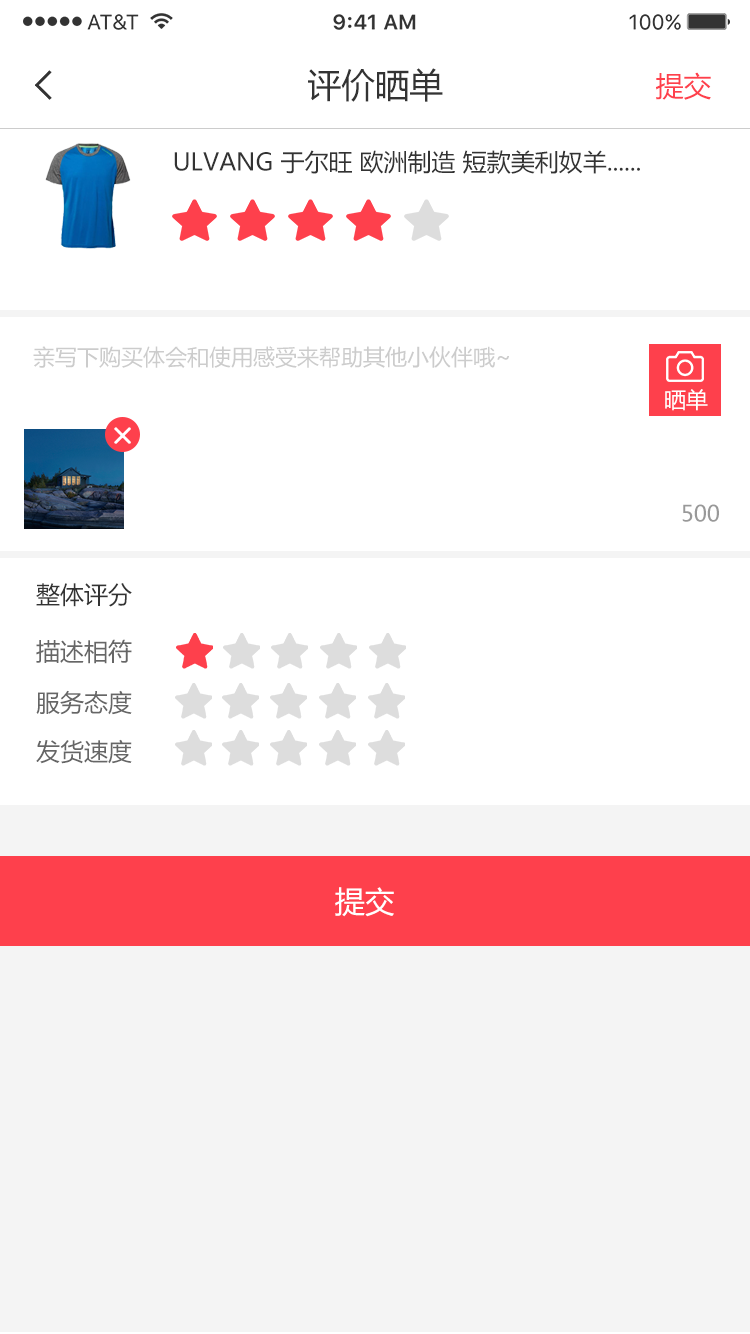
<style>
.page{position:relative;width:750px;height:1334px;background:#ffffff}
.page>*{position:absolute;margin:0}
.t1{font:34px "MicrosoftYaHei";color:#333333}
.t2{font:28px "MicrosoftYaHei";color:#fe404c}
.t3{font:24px "MicrosoftYaHei";color:#333333}
.t4{font:22px "MicrosoftYaHei";color:#cccccc}
.t5{font:22px "MicrosoftYaHei";color:#ffffff}
.t6{font:22px "MicrosoftYaHei";color:#999999}
.t7{font:24px "MicrosoftYaHei";color:#666666}
.t8{font:30px "MicrosoftYaHei";color:#ffffff}
</style>
<div class="page">
<p class="t1" style="left:308px;top:68px;width:135px;height:34px">评价晒单</p>
<p class="t2" style="left:656px;top:72px;width:55px;height:28px">提交</p>
<p class="t3" style="left:174px;top:150px;width:466px;height:24px">ULVANG 于尔旺 欧洲制造 短款美利奴羊......</p>
<p class="t4" style="left:33px;top:346px;width:476px;height:22px">亲写下购买体会和使用感受来帮助其他小伙伴哦~</p>
<p class="t5" style="left:665px;top:389px;width:43px;height:22px">晒单</p>
<p class="t6" style="left:682px;top:504px;width:37px;height:18px">500</p>
<p class="t3" style="left:36px;top:583px;width:96px;height:24px">整体评分</p>
<p class="t7" style="left:36px;top:639px;width:96px;height:25px">描述相符</p>
<p class="t7" style="left:36px;top:690px;width:96px;height:25px">服务态度</p>
<p class="t7" style="left:36px;top:739px;width:96px;height:25px">发货速度</p>
<p class="t8" style="left:335px;top:887px;width:59px;height:30px">提交</p>
</div>
